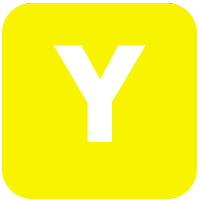
<style>
.page{position:relative;width:200px;height:200px;background:#f8f400}
.page>*{position:absolute;margin:0}
.t1{font:133.3px "Tahoma-Bold";letter-spacing:0.2em;color:#ffffff;text-transform:uppercase}
</style>
<div class="page">
<p class="t1" style="left:53px;top:45px;width:93px;height:97px">X</p>
<p class="t1" style="left:53px;top:45px;width:93px;height:97px">y</p>
</div>
